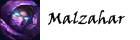
<style>
.page{position:relative;width:140px;height:40px;background:#ffffff}
.page>*{position:absolute;margin:0}
.t1{font:12px "VinerHandITC";color:#000000}
</style>
<div class="page">
<p class="t1" style="left:48px;top:10px;width:77px;height:15px">Malzahar</p>
</div>
